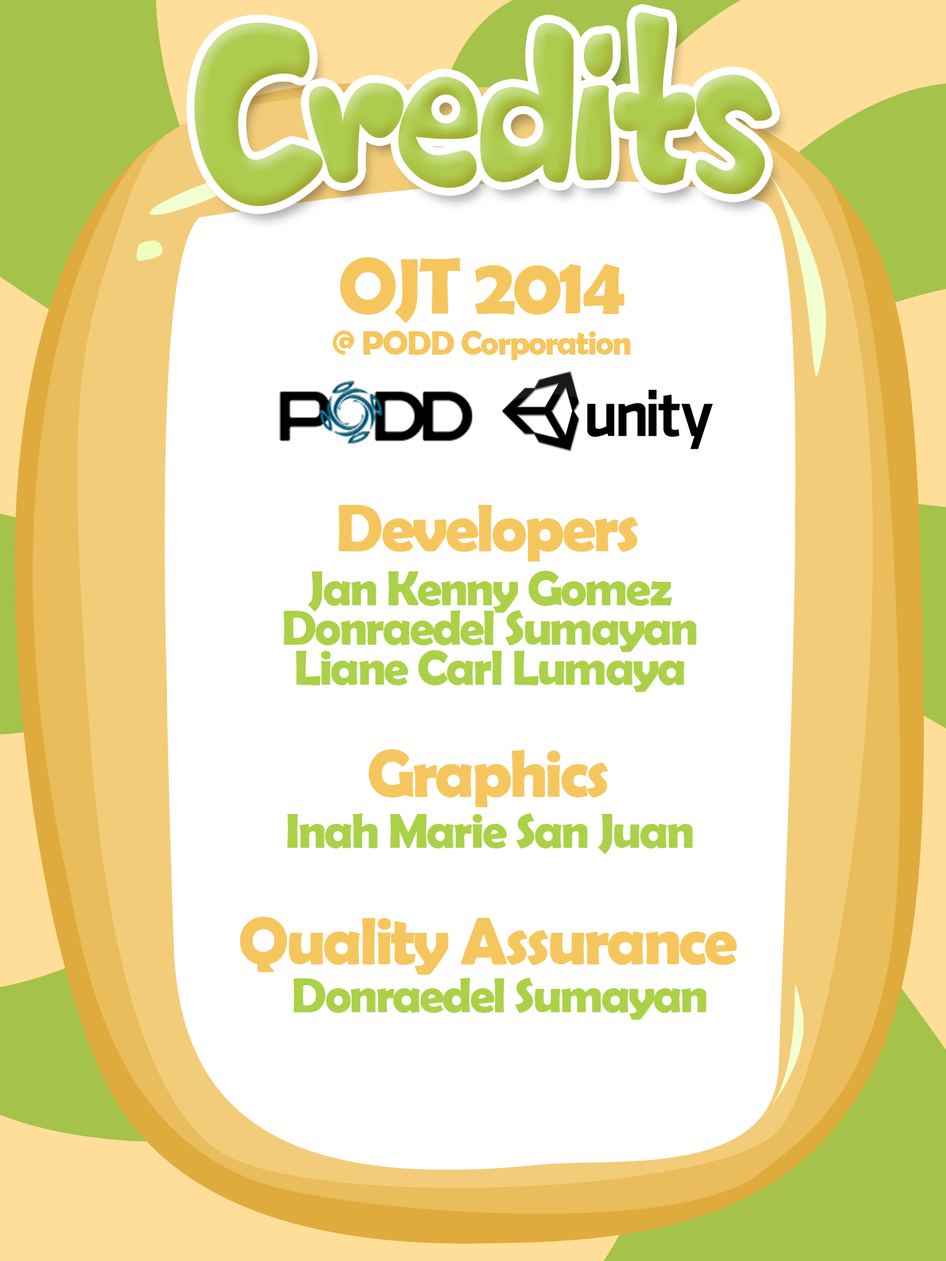
<style>
.page{position:relative;width:946px;height:1261px;background:#ffffff}
.page>*{position:absolute;margin:0}
.t1{font:34.4px "BerlinSansFBDemi-Bold";letter-spacing:-0.04em;color:#f6c65e}
.t2{font:79.7px "BerlinSansFBDemi-Bold";letter-spacing:-0.04em;color:#f6c65e}
.t3{font:67.1px "BerlinSansFBDemi-Bold";letter-spacing:-0.04em;color:#f6c65e}
.t4{font:49.6px/39.6px "BerlinSansFBDemi-Bold";letter-spacing:-0.04em;color:#abd148}
.t5{font:49.6px "BerlinSansFBDemi-Bold";letter-spacing:-0.04em;color:#abd148}
</style>
<div class="page">
<p class="t1" style="left:332px;top:257px;width:298px;height:103px;text-align:center"><span class="t2">OJT 2014<br></span>@ PODD Corporation</p>
<p class="t3" style="left:339px;top:505px;width:299px;height:57px">Developers</p>
<p class="t4" style="left:283px;top:571px;width:413px;height:121px;text-align:center">Jan Kenny Gomez<br>Donraedel Sumayan<br>Liane Carl Lumaya</p>
<p class="t3" style="left:368px;top:749px;width:240px;height:58px">Graphics</p>
<p class="t5" style="left:287px;top:813px;width:406px;height:41px">Inah Marie San Juan</p>
<p class="t3" style="left:240px;top:917px;width:497px;height:58px">Quality Assurance</p>
<p class="t5" style="left:293px;top:978px;width:413px;height:42px">Donraedel Sumayan</p>
</div>
